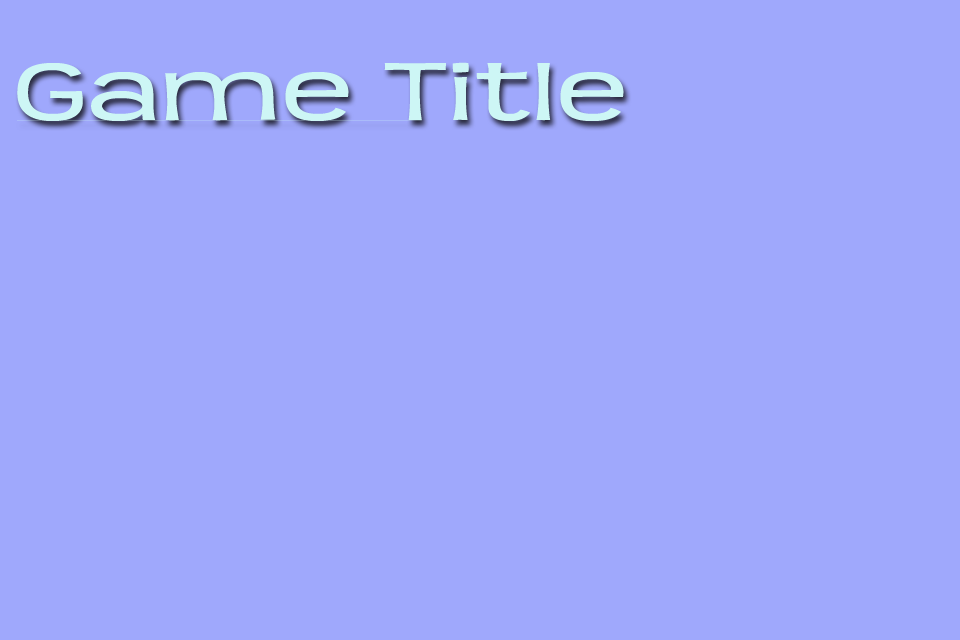
<style>
.page{position:relative;width:960px;height:640px;background:#9fa8fc}
.page>*{position:absolute;margin:0}
.t1{font:89.6px "Teen";color:#cdf6f5;scale:1.43 1}
</style>
<div class="page">
<p class="t1" style="left:17px;top:62px;width:607px;height:59px">Game Title</p>
</div>
